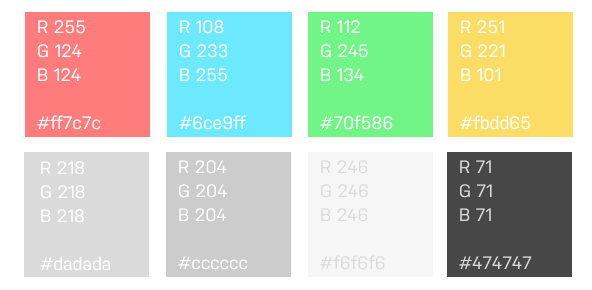
<style>
.page{position:relative;width:592px;height:290px;background:#ffffff}
.page>*{position:absolute;margin:0}
.t1{font:18px/24px "Nudista";color:#ffffff}
.t2{font:18px/24px "Nudista";color:#dadada}
</style>
<div class="page">
<p class="t1" style="left:37px;top:20px;width:64px;height:110px">R 255<br>G 124<br>B 124<br><br>#ff7c7c</p>
<p class="t1" style="left:179px;top:20px;width:67px;height:110px">R 108<br>G 233<br>B 255<br><br>#6ce9ff</p>
<p class="t1" style="left:320px;top:20px;width:73px;height:110px">R 112<br>G 245<br>B 134<br><br>#70f586</p>
<p class="t1" style="left:460px;top:20px;width:70px;height:110px">R 251<br>G 221<br>B 101<br><br>#fbdd65</p>
<p class="t1" style="left:40px;top:161px;width:70px;height:110px">R 218<br>G 218<br>B 218<br><br>#dadada</p>
<p class="t1" style="left:178px;top:160px;width:70px;height:110px">R 204<br>G 204<br>B 204<br><br>#cccccc</p>
<p class="t2" style="left:320px;top:160px;width:65px;height:110px">R 246<br>G 246<br>B 246<br><br>#f6f6f6</p>
<p class="t2" style="left:459px;top:160px;width:73px;height:109px">R 71<br>G 71<br>B 71<br><br>#474747</p>
</div>
